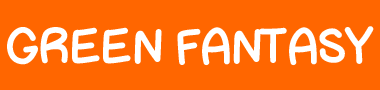
<style>
.page{position:relative;width:380px;height:90px;background:#ff6600}
.page>*{position:absolute;margin:0}
.t1{font:48.6px "ChunkyNess";color:#ffffff;text-transform:uppercase}
</style>
<div class="page">
<p class="t1" style="left:7px;top:26px;width:367px;height:40px">Green fantasy</p>
</div>
